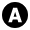
<style>
.page{position:relative;width:30px;height:30px;background:#ffffff}
.page>*{position:absolute;margin:0}
.t1{font:20px "Tahoma-Bold";color:#ffffff}
</style>
<div class="page">
<p class="t1" style="left:8px;top:7px;width:14px;height:16px">A</p>
</div>
